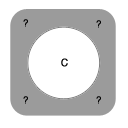
<style>
.page{position:relative;width:128px;height:128px;background:#ffffff}
.page>*{position:absolute;margin:0}
.t1{font:9.6px "Helvetica";color:#000000;font-weight:bold}
.t2{font:10px "Helvetica";font-weight:bold}
</style>
<div class="page">
<p class="t1" style="left:23px;top:19px;width:5px;height:8px">?</p>
<p class="t1" style="left:96px;top:20px;width:5px;height:8px">?</p>
<p class="t2" style="left:61px;top:58px;width:7px;height:9px">C</p>
<p class="t1" style="left:23px;top:96px;width:5px;height:8px">?</p>
<p class="t1" style="left:96px;top:96px;width:5px;height:8px">?</p>
</div>
